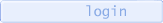
<style>
.page{position:relative;width:163px;height:23px;background:#e8effd}
.page>*{position:absolute;margin:0}
.t1{font:14px "LucidaConsole";color:#89aae5}
</style>
<div class="page">
<p class="t1" style="left:86px;top:5px;width:40px;height:14px">login</p>
</div>
